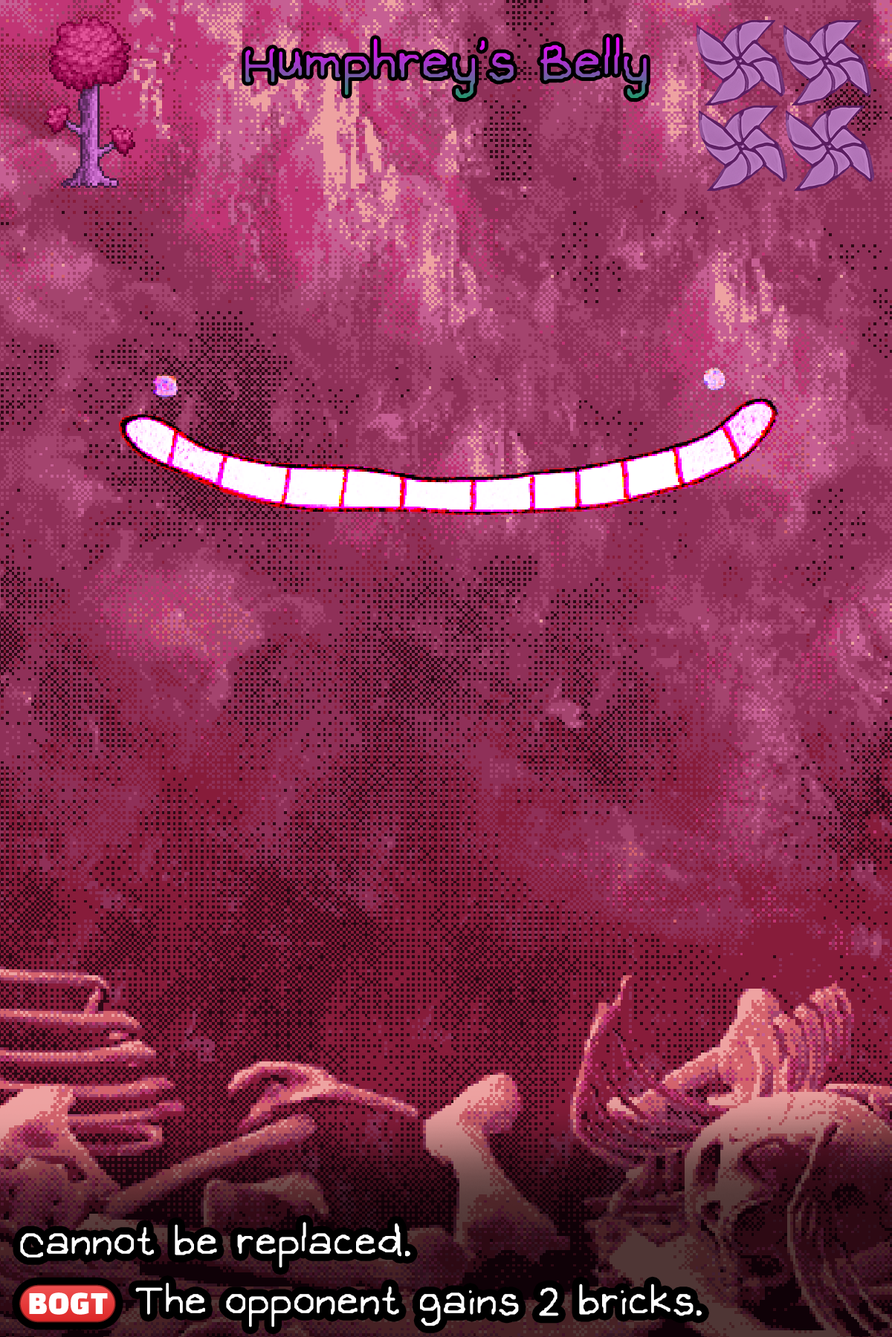
<style>
.page{position:relative;width:892px;height:1337px}
.page>*{position:absolute;margin:0}
.t1{font:133.7px "OMORI_GAME"}
.t2{font:104.8px/59.4px "OMORI_GAME";color:#ffffff}
.t3{font:65.5px/59.4px "stoogedings-Regular";color:#ffffff}
</style>
<div class="page">
<p class="t1" style="left:245px;top:37px;width:401px;height:61px">Humphrey's Belly</p>
<p class="t2" style="left:19px;top:1222px;width:682px;height:106px">Cannot be replaced.<br><span class="t3">(BOGT)</span> The opponent gains 2 bricks.</p>
</div>
